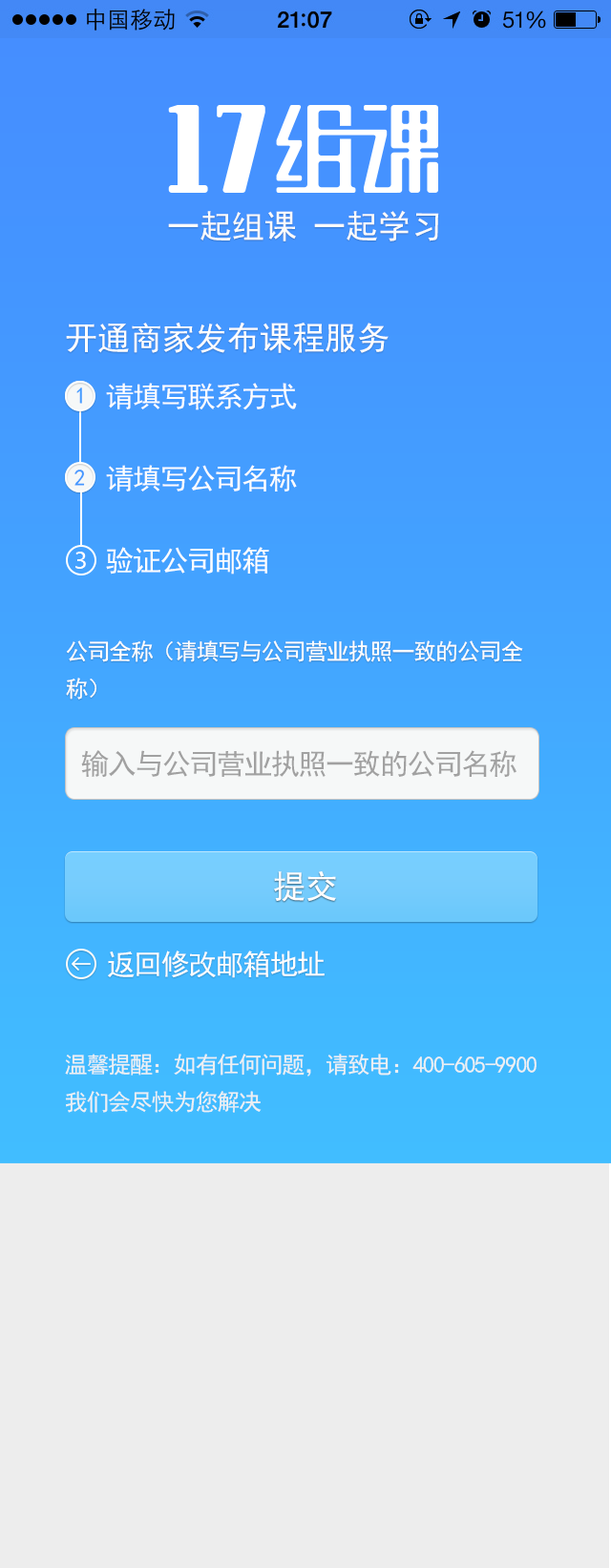
<style>
.page{position:relative;width:611px;height:1568px;background:#ededed}
.page>*{position:absolute;margin:0}
.t1{font:32.4px "SimHei";color:#fbfbfb}
.t2{font:32.4px "SimHei";color:#fefefe}
.t3{font:22.9px "SimHei";color:#449dff}
.t4{font:28.6px "SimHei";letter-spacing:-0.05em;color:#fefefe}
.t5{font:22.9px "SimHei";color:#4497ff}
.t6{font:22.9px "MicrosoftYaHei";color:#ffffff}
.t7{font:22.9px "SimHei";letter-spacing:-0.05em;color:#fefefe}
.t8{font:28.6px "SimHei";letter-spacing:-0.05em;color:#a1a1a1}
.t9{font:22.9px "SimHei";letter-spacing:-0.05em;color:#edf0f3}
</style>
<div class="page">
<p class="t1" style="left:168px;top:210px;width:271px;height:31px">一起组课 一起学习</p>
<p class="t2" style="left:66px;top:323px;width:322px;height:30px">开通商家发布课程服务</p>
<p class="t3" style="left:76px;top:387px;width:6px;height:17px">1</p>
<p class="t4" style="left:106px;top:383px;width:191px;height:27px">请填写联系方式</p>
<p class="t5" style="left:74px;top:470px;width:11px;height:16px">2</p>
<p class="t4" style="left:106px;top:465px;width:191px;height:27px">请填写公司名称</p>
<p class="t6" style="left:75px;top:552px;width:11px;height:17px">3</p>
<p class="t4" style="left:106px;top:547px;width:163px;height:28px">验证公司邮箱</p>
<p class="t7" style="left:66px;top:640px;width:457px;height:60px">公司全称（请填写与公司营业执照一致的公司全<br>称）</p>
<p class="t8" style="left:81px;top:750px;width:435px;height:28px">输入与公司营业执照一致的公司名称</p>
<p class="t2" style="left:274px;top:871px;width:62px;height:31px">提交</p>
<p class="t4" style="left:108px;top:951px;width:216px;height:27px">返回修改邮箱地址</p>
<p class="t9" style="left:65px;top:1054px;width:471px;height:59px">温馨提醒：如有任何问题，请致电：400-605-9900<br>我们会尽快为您解决</p>
</div>
